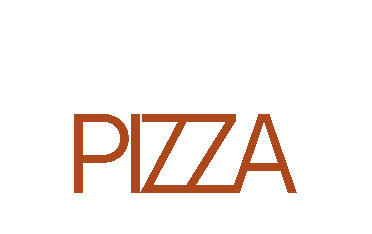
<style>
.page{position:relative;width:372px;height:234px;background:#ffffff}
.page>*{position:absolute;margin:0}
.t1{font:105.8px "Cy-Regular";letter-spacing:-0.1em;color:#ad481d;text-transform:uppercase}
</style>
<div class="page">
<p class="t1" style="left:74px;top:114px;width:223px;height:79px">pizza</p>
</div>
